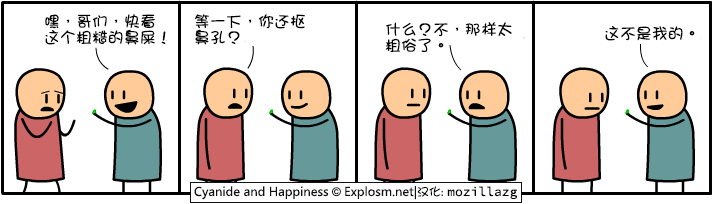
<style>
.page{position:relative;width:713px;height:204px;background:#ffffff}
.page>*{position:absolute;margin:0}
.t1{font:16px/16px "DFGirl";color:#000000}
.t2{font:16px "DFGirl";color:#000000}
</style>
<div class="page">
<p class="t1" style="left:45px;top:14px;width:121px;height:31px">嘿，哥们，快看<br>这个粗糙的鼻屎！</p>
<p class="t1" style="left:195px;top:14px;width:110px;height:31px">等一下，你还抠<br>鼻孔？</p>
<p class="t1" style="left:385px;top:22px;width:127px;height:30px">什么？不，那样太<br>粗俗了。</p>
<p class="t2" style="left:605px;top:26px;width:90px;height:15px">这不是我的。</p>
</div>
